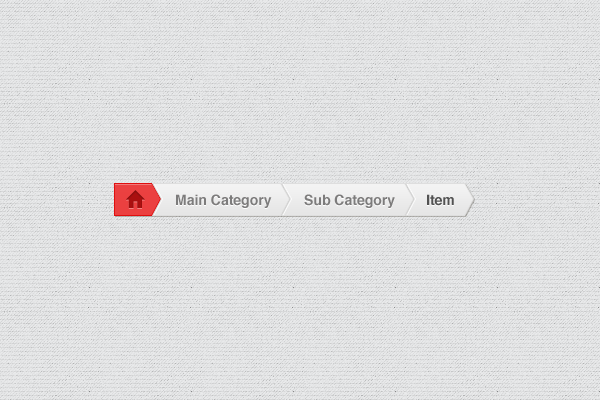
<style>
.page{position:relative;width:600px;height:400px}
.page>*{position:absolute;margin:0}
.t1{font:14px "Helvetica-Bold";color:#7d7c7c}
.t2{font:14px "Helvetica-Bold";color:#525252}
</style>
<div class="page">
<p class="t1" style="left:176px;top:194px;width:96px;height:14px">Main Category</p>
<p class="t1" style="left:304px;top:194px;width:91px;height:14px">Sub Category</p>
<p class="t2" style="left:427px;top:194px;width:27px;height:12px">Item</p>
</div>
